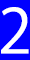
<style>
.page{position:relative;width:30px;height:60px;background:#0000ff}
.page>*{position:absolute;margin:0}
.t1{font:60.7px "KozGoPr6N-Regular";color:#ffffff}
</style>
<div class="page">
<p class="t1" style="left:1px;top:7px;width:28px;height:47px">2</p>
</div>
